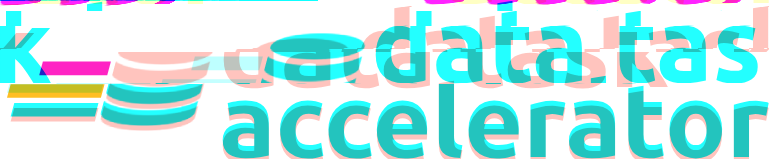
<style>
.page{position:relative;width:769px;height:159px;background:#ffffff}
.page>*{position:absolute;margin:0}
.t1{font:104.7px "Ubuntu-Bold"}
</style>
<div class="page">
<p class="t1" style="left:222px;top:0px;width:547px;height:159px">data task<br>accelerator</p>
</div>
